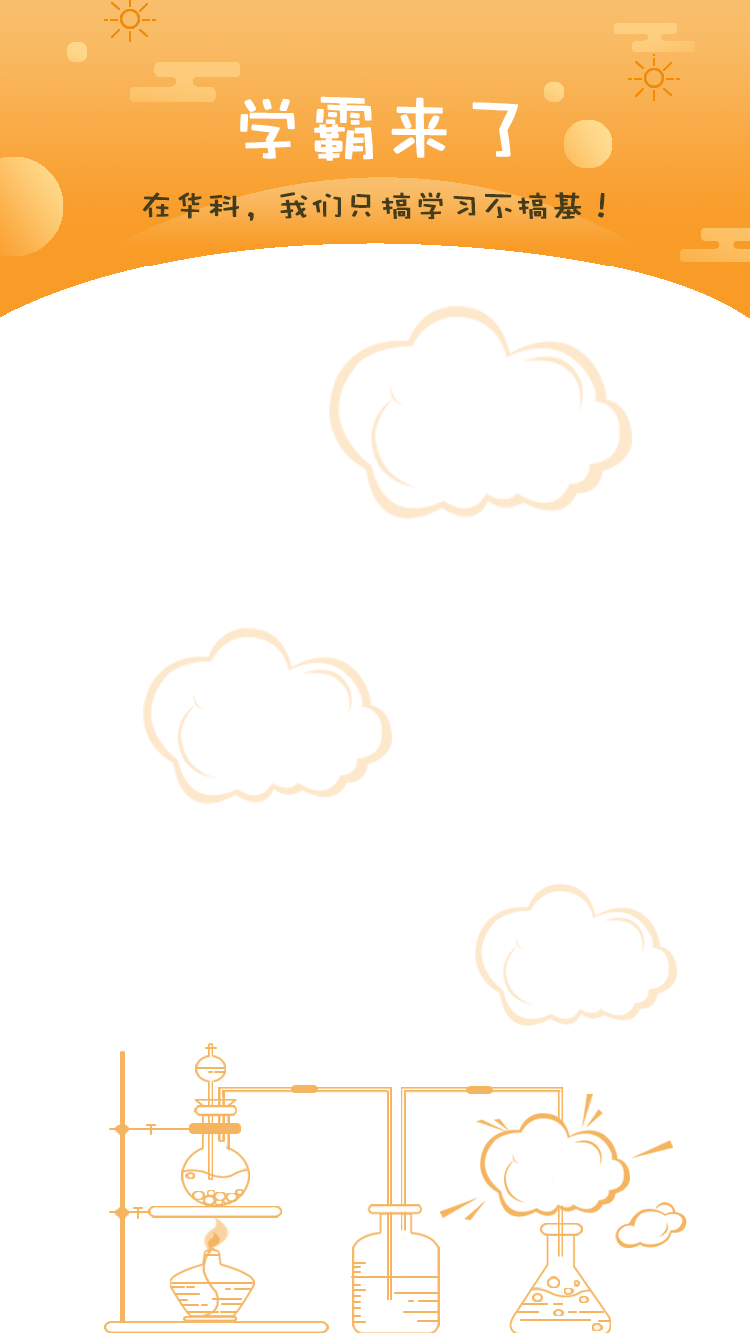
<style>
.page{position:relative;width:750px;height:1333px;background:#ffffff}
.page>*{position:absolute;margin:0}
.t1{font:75px "DFPWaWaW5";color:#ffffff;font-weight:bold}
.t2{font:33.3px "DFPWaWaW5";color:#433d1c;font-weight:bold}
</style>
<div class="page">
<p class="t1" style="left:240px;top:96px;width:278px;height:65px">学霸来了</p>
<p class="t2" style="left:142px;top:192px;width:463px;height:29px">在华科，我们只搞学习不搞基！</p>
</div>
